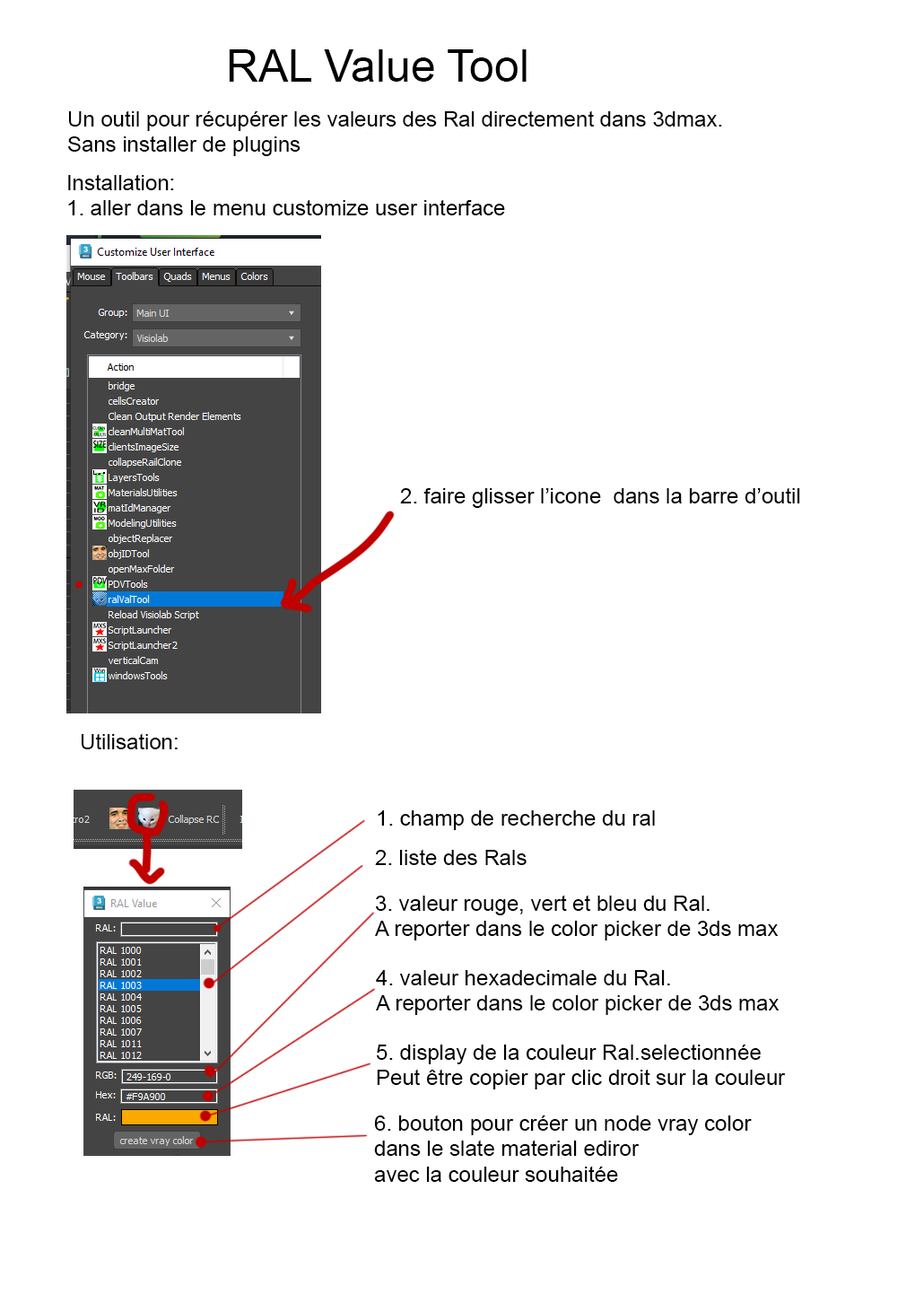
<style>
.page{position:relative;width:915px;height:1303px;background:#ffffff}
.page>*{position:absolute;margin:0}
.t1{font:44.9px "ArialMT";color:#000000}
.t2{font:21.5px "ArialMT";color:#000000}
</style>
<div class="page">
<p class="t1" style="left:229px;top:49px;width:298px;height:33px">RAL Value Tool</p>
<p class="t2" style="left:68px;top:110px;width:654px;height:46px">Un outil pour récupérer les valeurs des Ral directement dans 3dmax.<br>Sans installer de plugins</p>
<p class="t2" style="left:68px;top:174px;width:437px;height:41px">Installation:<br>1. aller dans le menu customize user interface</p>
<p class="t2" style="left:400px;top:487px;width:400px;height:21px">2. faire glisser l’icone  dans la barre d’outil</p>
<p class="t2" style="left:81px;top:733px;width:97px;height:16px">Utilisation:</p>
<p class="t2" style="left:378px;top:810px;width:277px;height:20px">1. champ de recherche du ral</p>
<p class="t2" style="left:375px;top:849px;width:152px;height:16px">2. liste des Rals</p>
<p class="t2" style="left:375px;top:895px;width:404px;height:45px">3. valeur rouge, vert et bleu du Ral.<br>A reporter dans le color picker de 3ds max</p>
<p class="t2" style="left:376px;top:970px;width:404px;height:45px">4. valeur hexadecimale du Ral.<br>A reporter dans le color picker de 3ds max</p>
<p class="t2" style="left:377px;top:1044px;width:409px;height:45px">5. display de la couleur Ral.selectionnée<br>Peut être copier par clic droit sur la couleur</p>
<p class="t2" style="left:374px;top:1114px;width:378px;height:68px">6. bouton pour créer un node vray color <br>dans le slate material ediror<br>avec la couleur souhaitée</p>
</div>
